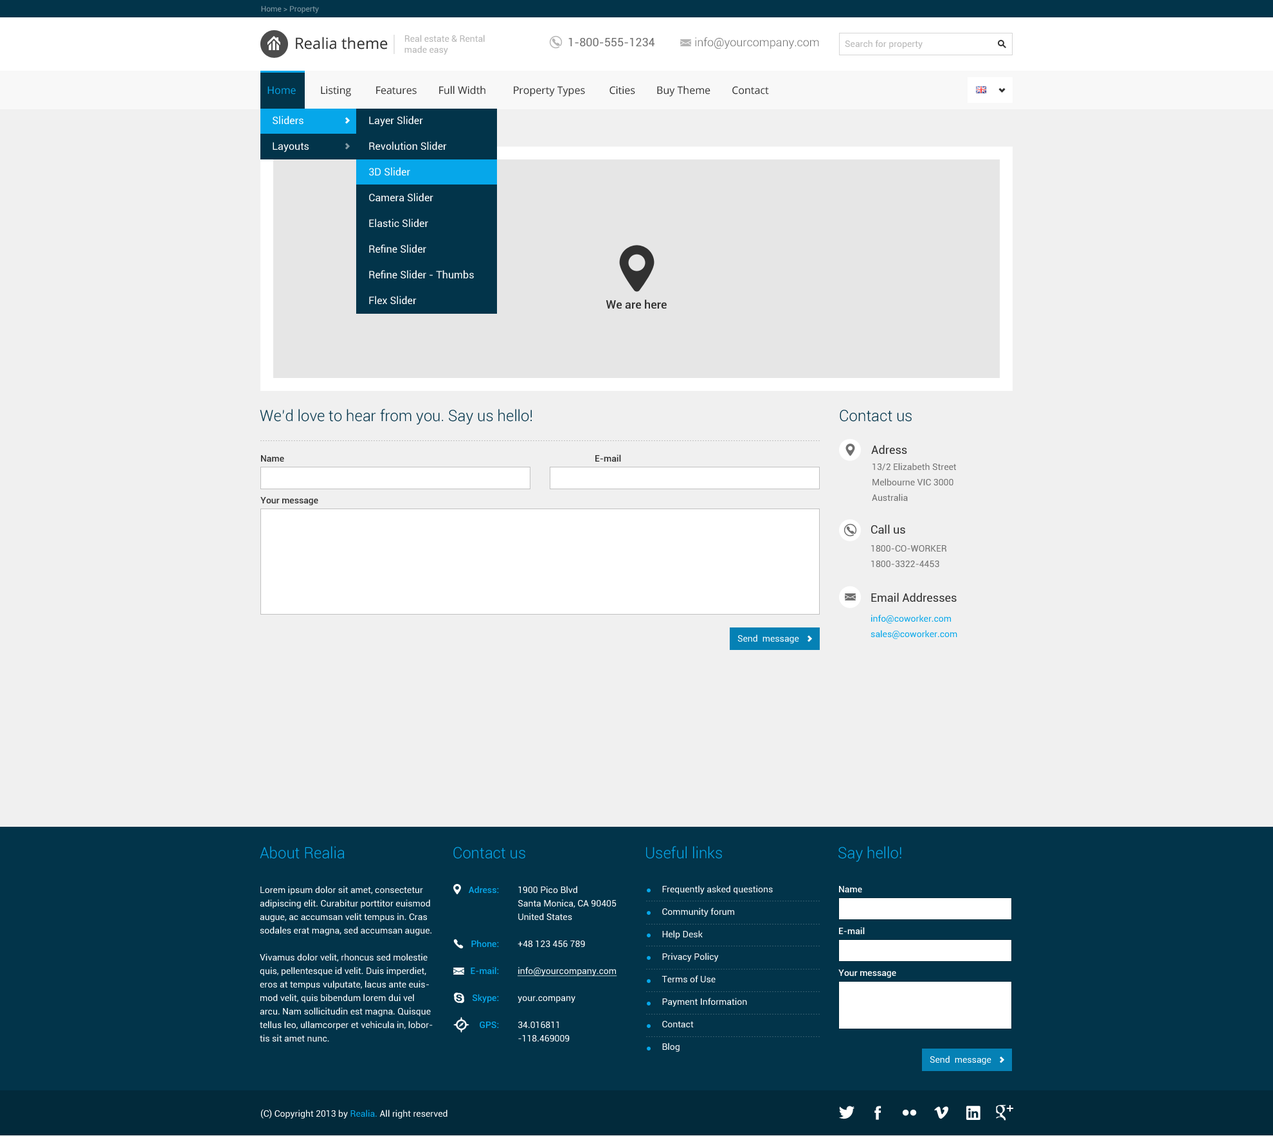
<style>
.page{position:relative;width:1273px;height:1136px;background:#f0f0f0}
.page>*{position:absolute;margin:0}
.t1{font:7.7px "Roboto-Regular";color:#819aa5}
.t2{font:15.4px "OpenSans";color:#313131}
.t3{font:9px "Roboto-Regular";color:#b5b5b5}
.t4{font:11.6px "Roboto-Regular";color:#707070}
.t5{font:11.6px "Roboto-Light";color:#707070}
.t6{font:10.3px "OpenSans";color:#313131}
.t7{font:10.3px "OpenSans";color:#06a7ea}
.t8{font:10.3px/25.7px "Roboto-Regular";color:#ffffff}
.t9{font:11.6px "Roboto-Medium";color:#313131}
.t10{font:15.4px "Roboto-Light";color:#02344a}
.t11{font:11.6px "Roboto-Regular";color:#313131}
.t12{font:9px "Roboto-Medium";color:#313131}
.t13{font:9px/15.4px "Roboto-Regular";color:#707070}
.t14{font:9px/15.4px "Roboto-Regular";color:#06a7ea}
.t15{font:9px "Roboto-Regular";color:#ffffff}
.t16{font:15.4px "Roboto-Light";color:#06a7ea}
.t17{font:9px/13.5px "Roboto-Regular";color:#ffffff}
.t18{font:9px/13.5px "Roboto-Medium";color:#06a7ea}
.t19{font:9px/13.5px "Roboto-Regular";color:#ffffff;text-decoration:underline}
.t20{font:9px/22.5px "Roboto-Regular";color:#ffffff}
.t21{font:9px "Roboto-Medium";color:#ffffff}
.t22{font:9px "Roboto-Regular";color:#06a7ea}
</style>
<div class="page">
<p class="t1" style="left:261px;top:6px;width:58px;height:8px">Home &gt; Property</p>
<p class="t2" style="left:296px;top:37px;width:92px;height:13px">Realia theme</p>
<p class="t3" style="left:404px;top:35px;width:81px;height:20px">Real estate &amp; Rental<br>made easy</p>
<p class="t4" style="left:568px;top:38px;width:86px;height:9px">1-800-555-1234</p>
<p class="t5" style="left:695px;top:37px;width:124px;height:12px">info@yourcompany.com</p>
<p class="t3" style="left:845px;top:40px;width:78px;height:9px">Search for property</p>
<p class="t6" style="left:267px;top:86px;width:502px;height:10px"><span class="t7">Home         </span>Listing         Features        Full Width          Property Types         Cities        Buy Theme        Contact</p>
<p class="t8" style="left:273px;top:116px;width:36px;height:36px">Sliders<br>Layouts</p>
<p class="t8" style="left:369px;top:116px;width:105px;height:188px">Layer Slider<br>Revolution Slider<br>3D Slider<br>Camera Slider<br>Elastic Slider<br>Refine Slider<br>Refine Slider - Thumbs<br>Flex Slider</p>
<p class="t9" style="left:606px;top:300px;width:61px;height:9px">We are here</p>
<p class="t10" style="left:260px;top:409px;width:272px;height:16px">We’d love to hear from you. Say us hello!</p>
<p class="t10" style="left:840px;top:410px;width:72px;height:12px">Contact us</p>
<p class="t11" style="left:871px;top:445px;width:36px;height:9px">Adress</p>
<p class="t12" style="left:261px;top:455px;width:23px;height:7px">Name</p>
<p class="t12" style="left:595px;top:455px;width:26px;height:7px">E-mail</p>
<p class="t13" style="left:872px;top:463px;width:84px;height:38px">13/2 Elizabeth Street <br>Melbourne VIC 3000<br>Australia</p>
<p class="t12" style="left:260px;top:497px;width:58px;height:8px">Your message</p>
<p class="t11" style="left:871px;top:525px;width:34px;height:9px">Call us</p>
<p class="t13" style="left:871px;top:545px;width:75px;height:22px">1800-CO-WORKER <br>1800-3322-4453</p>
<p class="t11" style="left:871px;top:593px;width:86px;height:9px">Email Addresses</p>
<p class="t14" style="left:870px;top:615px;width:87px;height:24px">info@coworker.com <br>sales@coworker.com</p>
<p class="t15" style="left:737px;top:634px;width:62px;height:10px">Send  message</p>
<p class="t16" style="left:260px;top:846px;width:85px;height:13px">About Realia</p>
<p class="t16" style="left:453px;top:847px;width:72px;height:12px">Contact us</p>
<p class="t16" style="left:646px;top:846px;width:76px;height:13px">Useful links</p>
<p class="t16" style="left:838px;top:846px;width:63px;height:16px">Say hello!</p>
<p class="t17" style="left:260px;top:886px;width:173px;height:156px">Lorem ipsum dolor sit amet, consectetur adipiscing elit. Curabitur porttitor euismod augue, ac accumsan velit tempus in. Cras sodales erat magna, sed accumsan augue. <br><br>Vivamus dolor velit, rhoncus sed molestie quis, pellentesque id velit. Duis imperdiet, eros at tempus vulputate, lacus ante euismod velit, quis bibendum lorem dui vel arcu. Nam sollicitudin est magna. Quisque tellus leo, ullamcorper et vehicula in, lobortis sit amet nunc.</p>
<p class="t18" style="left:469px;top:886px;width:30px;height:142px;text-align:right">Adress:<br><br><br><br>Phone:<br><br>E-mail:<br><br>Skype:<br><br>GPS:</p>
<p class="t17" style="left:518px;top:886px;width:99px;height:155px">1900 Pico Blvd<br>Santa Monica, CA 90405<br>United States<br><br>+48 123 456 789<br><br><span class="t19">info@yourcompany.com<br><br></span>your.company<br><br>34.016811<br>-118.469009</p>
<p class="t20" style="left:662px;top:885px;width:111px;height:167px">Frequently asked questions<br>Community forum<br>Help Desk<br>Privacy Policy<br>Terms of Use<br>Payment Information<br>Contact <br>Blog</p>
<p class="t21" style="left:839px;top:886px;width:23px;height:7px">Name</p>
<p class="t21" style="left:839px;top:927px;width:26px;height:8px">E-mail</p>
<p class="t21" style="left:838px;top:969px;width:58px;height:9px">Your message</p>
<p class="t15" style="left:930px;top:1056px;width:61px;height:9px">Send  message</p>
<p class="t15" style="left:261px;top:1109px;width:186px;height:10px">(C) Copyright 2013 by <span class="t22">Realia. </span>All right reserved</p>
</div>
